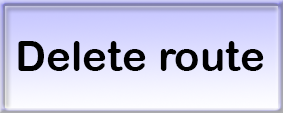
<style>
.page{position:relative;width:283px;height:113px}
.page>*{position:absolute;margin:0}
.t1{font:42px "ArialRoundedMTBold";color:#000000}
</style>
<div class="page">
<p class="t1" style="left:18px;top:41px;width:246px;height:30px">Delete route</p>
</div>
